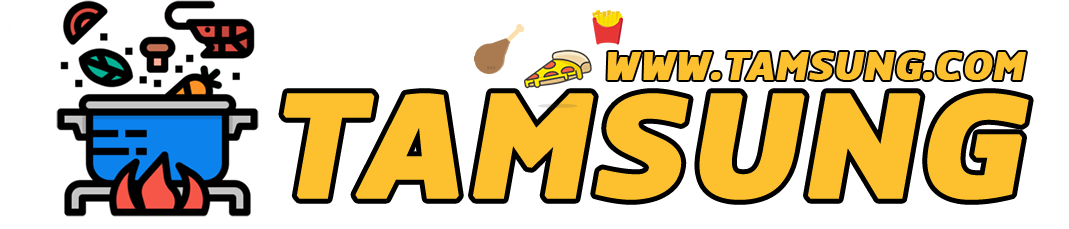
<style>
.page{position:relative;width:1069px;height:229px;background:#ffffff}
.page>*{position:absolute;margin:0}
.t1{font:52.8px "FCEkaluckBold";letter-spacing:0.005em;color:#fdc130;text-transform:uppercase;font-weight:bold;font-style:italic}
.t2{font:200px "FCEkaluckBold";letter-spacing:0.005em;color:#fdc130;text-transform:uppercase;font-weight:bold;font-style:italic}
</style>
<div class="page">
<p class="t1" style="left:607px;top:52px;width:419px;height:28px">WWW.TAMSUNG.COM</p>
<p class="t2" style="left:283px;top:93px;width:746px;height:107px">TAMSUNG</p>
</div>
